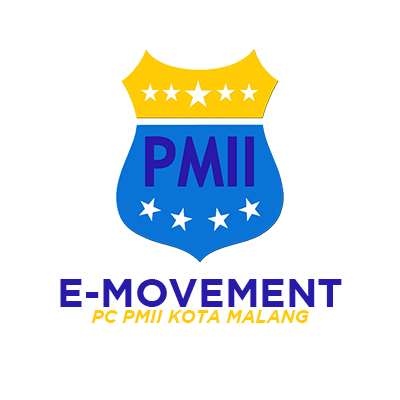
<style>
.page{position:relative;width:400px;height:400px;background:#ffffff}
.page>*{position:absolute;margin:0}
.t1{font:39.8px "Gotham-Bold";color:#281aaa}
.t2{font:18.1px "Gotham-BoldItalic";color:#ffcb05}
</style>
<div class="page">
<p class="t1" style="left:60px;top:279px;width:282px;height:28px">E-MOVEMENT</p>
<p class="t2" style="left:91px;top:310px;width:218px;height:13px">PC PMII KOTA MALANG</p>
</div>
